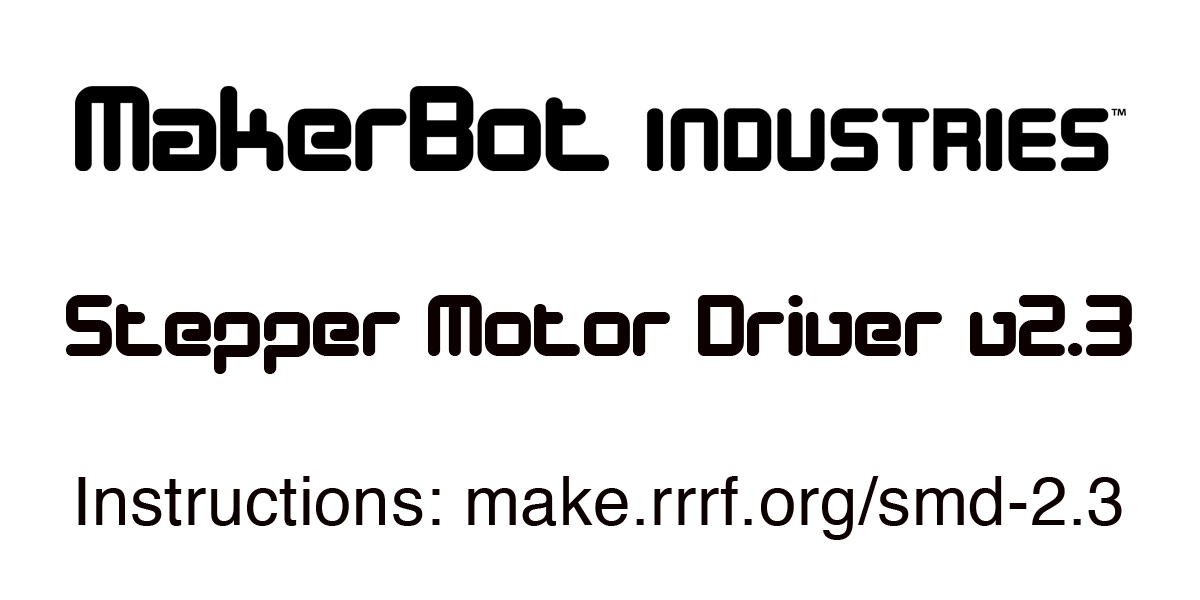
<style>
.page{position:relative;width:1200px;height:600px;background:#ffffff}
.page>*{position:absolute;margin:0}
.t1{font:89px "DesignerBlock";letter-spacing:0.01em;color:#0c0000}
.t2{font:67.4px "Helvetica";letter-spacing:0.01em;color:#0c0000}
</style>
<div class="page">
<p class="t1" style="left:66px;top:295px;width:1066px;height:79px">Stepper Motor Driver v2.3</p>
<p class="t2" style="left:78px;top:476px;width:1044px;height:64px">Instructions: make.rrrf.org/smd-2.3</p>
</div>
